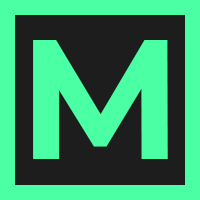
<style>
.page{position:relative;width:200px;height:200px;background:#4bffa5}
.page>*{position:absolute;margin:0}
.t1{font:170.4px "Montserrat-Bold";color:#4bffa5}
</style>
<div class="page">
<p class="t1" style="left:33px;top:40px;width:135px;height:119px">M</p>
</div>
